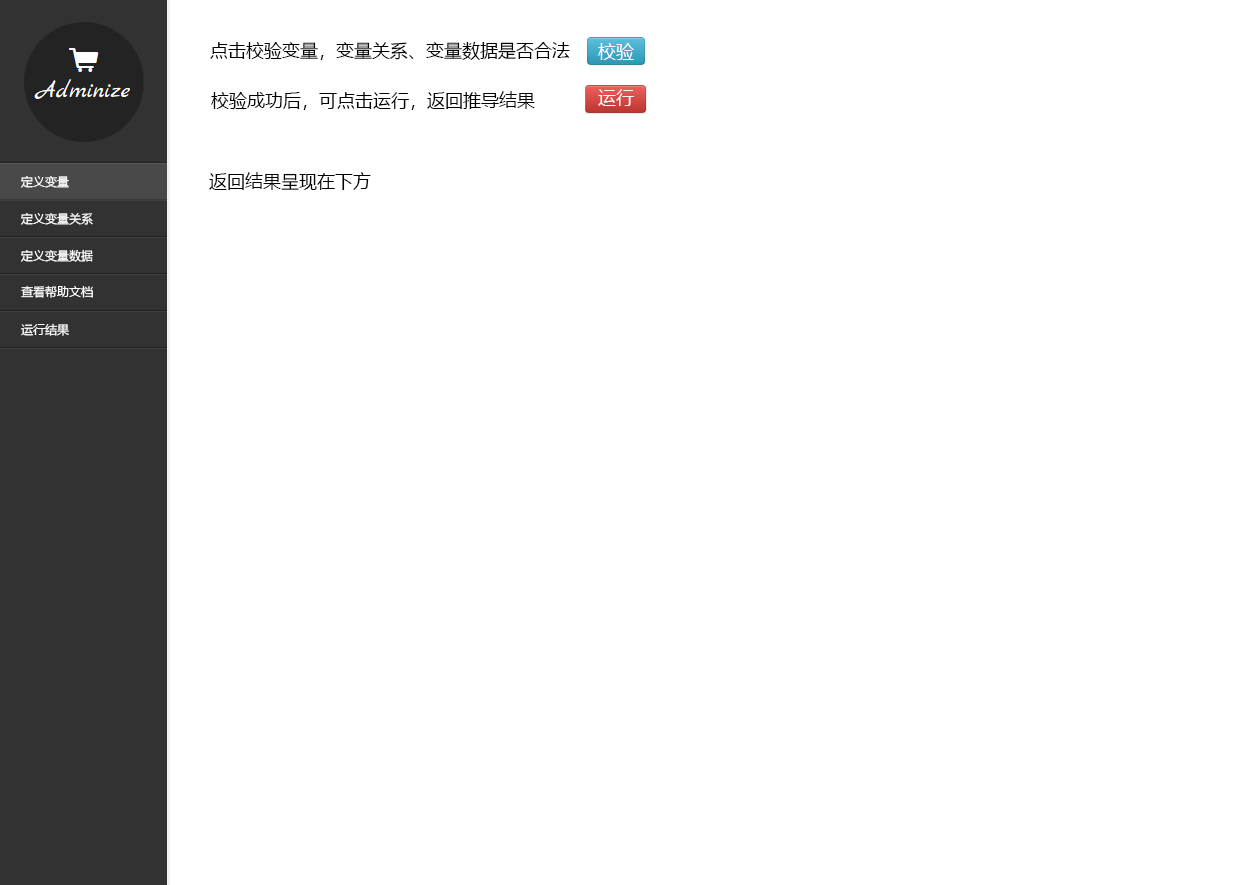
<style>
.page{position:relative;width:1236px;height:885px;background:#ffffff}
.page>*{position:absolute;margin:0}
.t1{font:18px "MicrosoftYaHei";color:#000000}
.t2{font:18px "MicrosoftYaHei";color:#ffffff}
.t3{font:12px "MicrosoftYaHei";color:#ffffff}
</style>
<div class="page">
<p class="t1" style="left:210px;top:42px;width:360px;height:18px">点击校验变量，变量关系、变量数据是否合法</p>
<p class="t2" style="left:598px;top:43px;width:36px;height:17px">校验</p>
<p class="t2" style="left:598px;top:89px;width:36px;height:17px">运行</p>
<p class="t1" style="left:211px;top:91px;width:324px;height:19px">校验成功后，可点击运行，返回推导结果</p>
<p class="t1" style="left:209px;top:172px;width:162px;height:18px">返回结果呈现在下方</p>
<p class="t3" style="left:21px;top:176px;width:48px;height:12px">定义变量</p>
<p class="t3" style="left:21px;top:213px;width:72px;height:12px">定义变量关系</p>
<p class="t3" style="left:21px;top:249px;width:72px;height:13px">定义变量数据</p>
<p class="t3" style="left:21px;top:285px;width:72px;height:13px">查看帮助文档</p>
<p class="t3" style="left:21px;top:323px;width:48px;height:13px">运行结果</p>
</div>
